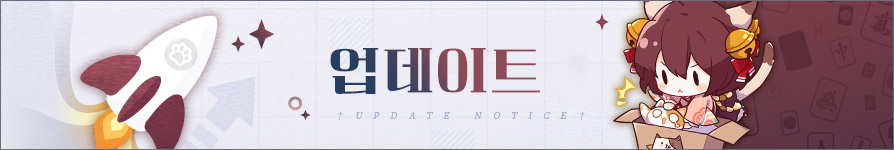
<style>
.page{position:relative;width:894px;height:150px}
.page>*{position:absolute;margin:0}
.t1{font:56.2px "Cafe24ClassicType-Regular";letter-spacing:0.04em;scale:0.93 1}
</style>
<div class="page">
<p class="t1" style="left:330px;top:48px;width:210px;height:46px">업데이트</p>
</div>
